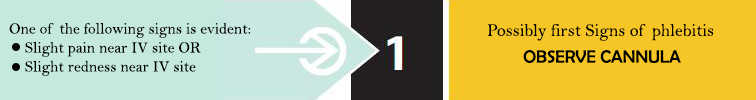
<style>
.page{position:relative;width:756px;height:100px;background:#f6c626}
.page>*{position:absolute;margin:0}
.t1{font:15.8px "BellMT";color:#000000}
.t2{font:17.8px "BellMT";color:#000000}
.t3{font:17.8px "BerlinSansFB-Reg";color:#000000}
</style>
<div class="page">
<p class="t1" style="left:9px;top:22px;width:242px;height:54px">One of the following signs is evident:<br>    Slight pain near IV site OR<br>    Slight redness near IV site</p>
<p class="t2" style="left:487px;top:23px;width:227px;height:18px">Possibly first Signs of phlebitis</p>
<p class="t3" style="left:523px;top:50px;width:158px;height:13px">OBSERVE CANNULA</p>
</div>
